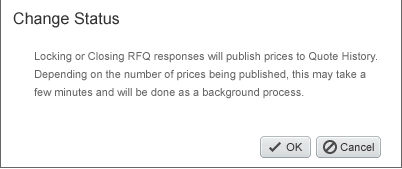
<style>
.page{position:relative;width:402px;height:169px;background:#ffffff}
.page>*{position:absolute;margin:0}
.t1{font:16px "ArialMT";letter-spacing:0.005em;color:#333333}
.t2{font:11px/18px "ArialMT";color:#666666}
.t3{font:11px "ArialMT";color:#303030}
</style>
<div class="page">
<p class="t1" style="left:13px;top:12px;width:106px;height:16px">Change Status</p>
<p class="t2" style="left:34px;top:52px;width:343px;height:47px">Locking or Closing RFQ responses will publish prices to Quote History.<br>Depending on the number of prices being published, this may take a<br>few minutes and will be done as a background process.</p>
<p class="t3" style="left:286px;top:143px;width:17px;height:8px">OK</p>
<p class="t3" style="left:340px;top:143px;width:34px;height:8px">Cancel</p>
</div>
